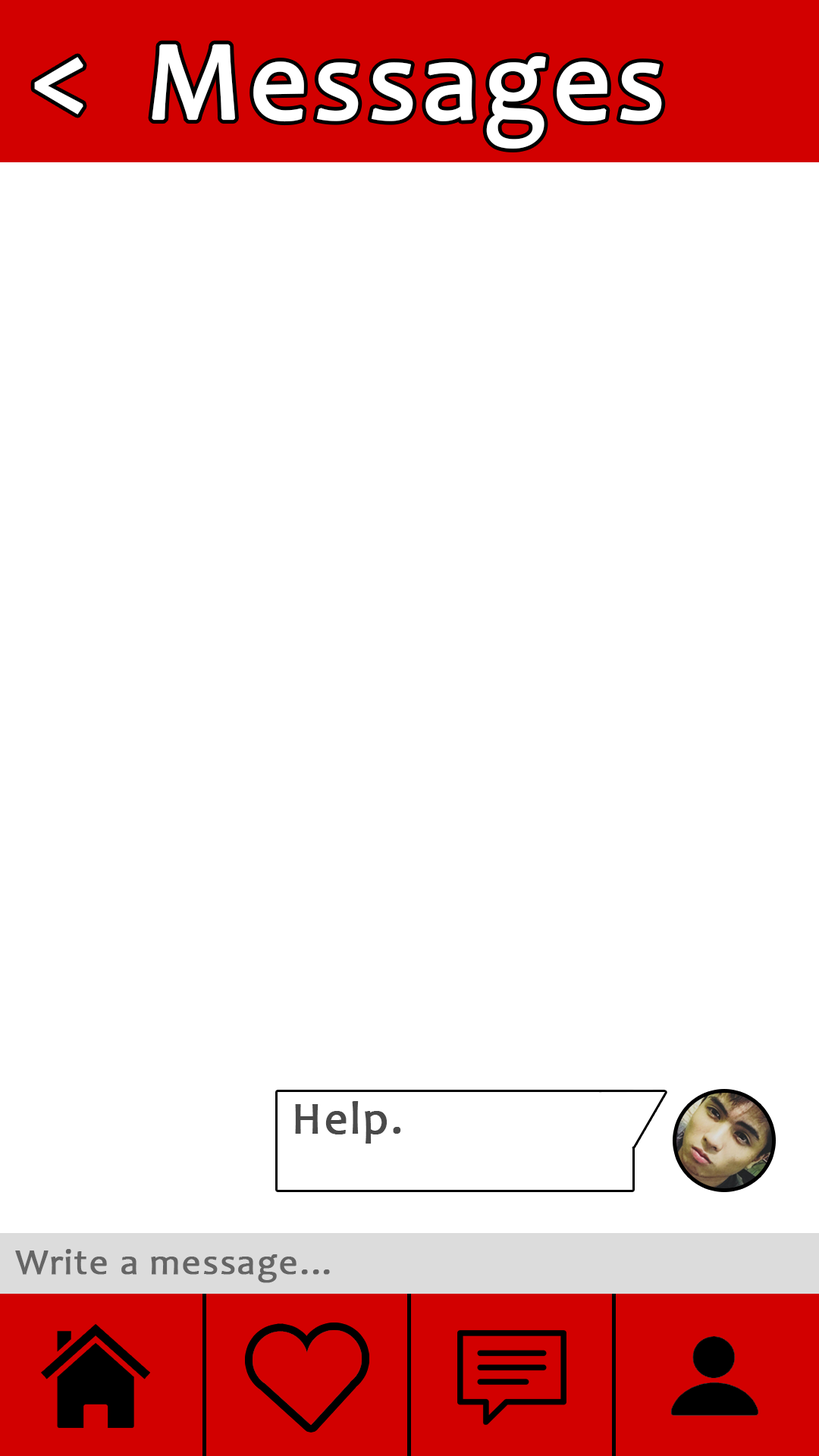
<style>
.page{position:relative;width:819px;height:1456px;background:#ffffff}
.page>*{position:absolute;margin:0}
.t1{font:113.4px "Candara";letter-spacing:0.03em;color:#ffffff;font-weight:bold}
.t2{font:113.7px "Candara";letter-spacing:0.03em;color:#ffffff;font-weight:bold}
.t3{font:45.5px "Candara";letter-spacing:0.03em;color:#4a4a4a;font-weight:bold}
.t4{font:36.4px "Candara";letter-spacing:0.03em;color:#656565;font-weight:bold}
</style>
<div class="page">
<p class="t1" style="left:152px;top:44px;width:510px;height:105px">Messages</p>
<p class="t2" style="left:34px;top:57px;width:49px;height:58px">&lt;</p>
<p class="t3" style="left:295px;top:1101px;width:106px;height:43px">Help.</p>
<p class="t4" style="left:15px;top:1249px;width:315px;height:34px">Write a message...</p>
</div>
